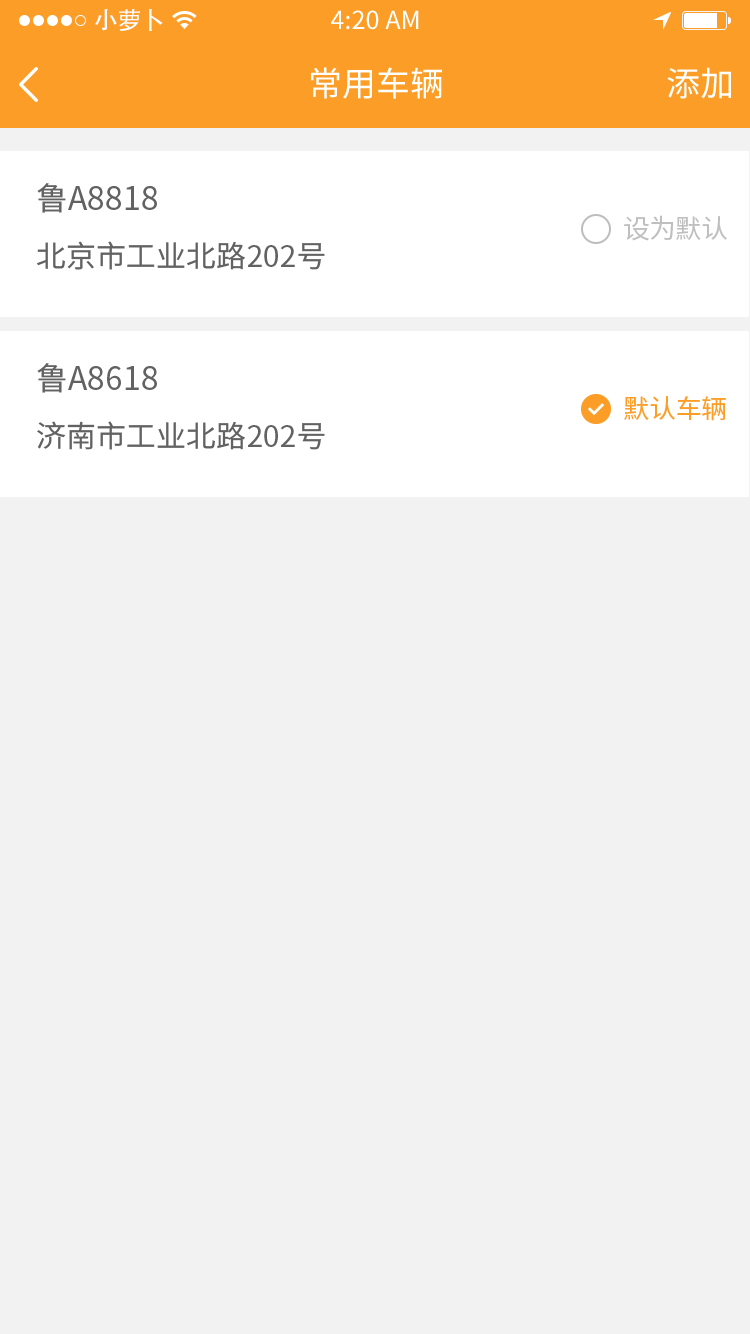
<style>
.page{position:relative;width:750px;height:1334px;background:#f2f2f2}
.page>*{position:absolute;margin:0}
.t1{font:24px "AdobeHeitiStd-Regular";color:#ffffff}
.t2{font:25px "SourceHanSansCN-Regular";color:#ffffff}
.t3{font:34px "SourceHanSansCN-Regular";color:#ffffff}
.t4{font:32px "SourceHanSansCN-Regular";color:#626262}
.t5{font:26px "SourceHanSansCN-Regular";color:#bfbfbf}
.t6{font:30px "SourceHanSansCN-Regular";color:#626262}
.t7{font:26px "SourceHanSansCN-Regular";color:#fb9d27}
</style>
<div class="page">
<p class="t1" style="left:95px;top:9px;width:68px;height:22px">小萝卜</p>
<p class="t2" style="left:331px;top:10px;width:88px;height:20px">4:20 AM</p>
<p class="t3" style="left:311px;top:67px;width:131px;height:32px">常用车辆</p>
<p class="t3" style="left:667px;top:67px;width:64px;height:32px">添加</p>
<p class="t4" style="left:37px;top:183px;width:120px;height:30px">鲁A8818</p>
<p class="t5" style="left:624px;top:215px;width:103px;height:26px">设为默认</p>
<p class="t6" style="left:37px;top:241px;width:288px;height:29px">北京市工业北路202号</p>
<p class="t4" style="left:37px;top:363px;width:120px;height:30px">鲁A8618</p>
<p class="t7" style="left:624px;top:396px;width:102px;height:25px">默认车辆</p>
<p class="t6" style="left:37px;top:421px;width:288px;height:29px">济南市工业北路202号</p>
</div>
